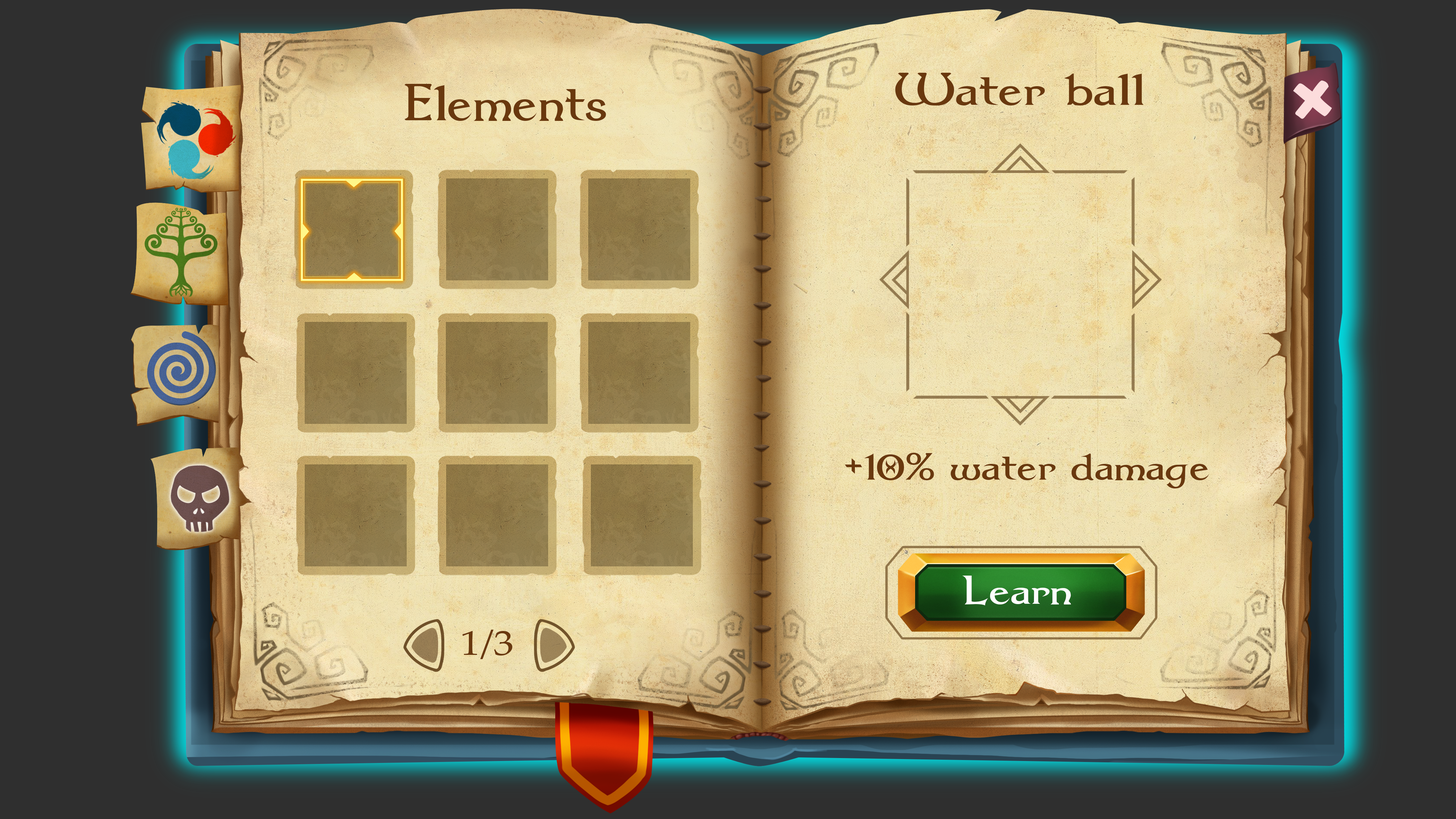
<style>
.page{position:relative;width:1456px;height:819px}
.page>*{position:absolute;margin:0}
.t1{font:53.4px "Dumbledor1";color:#69380e;scale:1.18 1}
.t2{font:60.3px "Dumbledor1";color:#69380e;scale:1.07 1}
.t3{font:126px "LunchBoxSlab";color:#fcdcdc}
.t4{font:44.3px "Dumbledor1";color:#69380e;scale:1.18 1}
.t5{font:46.4px "Dumbledor1";color:#fefefe;scale:1.18 1}
.t6{font:34.8px "PalatinoLinotype-Roman";color:#69380e;scale:1.18 1}
</style>
<div class="page">
<p class="t1" style="left:895px;top:73px;width:249px;height:32px">Water ball</p>
<p class="t2" style="left:404px;top:84px;width:202px;height:37px">Elements</p>
<p class="t3" style="left:1293px;top:80px;width:39px;height:39px;rotate:-4deg">×</p>
<p class="t4" style="left:845px;top:453px;width:365px;height:35px">+10% water damage</p>
<p class="t5" style="left:962px;top:575px;width:110px;height:30px">Learn</p>
<p class="t6" style="left:462px;top:629px;width:51px;height:30px">1/3</p>
</div>
